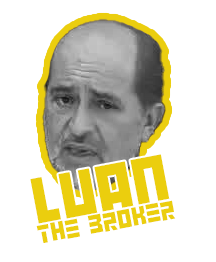
<style>
.page{position:relative;width:216px;height:262px;background:#ffffff}
.page>*{position:absolute;margin:0}
.t1{font:23.1px/20.2px "AngryAndroid";color:#ebce0e}
.t2{font:57.7px/20.2px "AngryAndroid";color:#ebce0e}
</style>
<div class="page">
<p class="t1" style="left:30px;top:154px;width:146px;height:89px;text-align:center;rotate:-11deg"><span class="t2">LUAN<br></span>THE BROKER</p>
</div>
